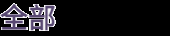
<style>
.page{position:relative;width:170px;height:36px;background:#000000}
.page>*{position:absolute;margin:0}
.t1{font:28px "WebPSD-18463539-0-Regular";color:#584871;font-weight:bold}
</style>
<div class="page">
<p class="t1" style="left:0px;top:0px;width:170px;height:36px">全部</p>
</div>
